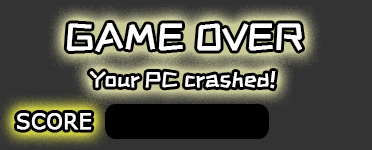
<style>
.page{position:relative;width:372px;height:150px;background:#333333}
.page>*{position:absolute;margin:0}
.t1{font:37px "ZCOOLKuaiLe-Regular";color:#ffffff;font-weight:bold}
.t2{font:21px "ZCOOLKuaiLe-Regular";color:#ffffff;font-weight:bold}
.t3{font:21px "Verdana";color:#ffffff;font-weight:bold}
</style>
<div class="page">
<p class="t1" style="left:66px;top:23px;width:236px;height:29px">GAME OVER</p>
<p class="t2" style="left:89px;top:71px;width:187px;height:18px">Your PC crashed!</p>
<p class="t3" style="left:17px;top:113px;width:75px;height:17px">SCORE</p>
</div>
